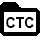
<style>
.page{position:relative;width:40px;height:40px;background:#ffffff}
.page>*{position:absolute;margin:0}
.t1{font:14.6px "Arial-BoldMT";color:#000000;scale:0.97 1}
</style>
<div class="page">
<p class="t1" style="left:6px;top:17px;width:28px;height:11px">CTC</p>
</div>
